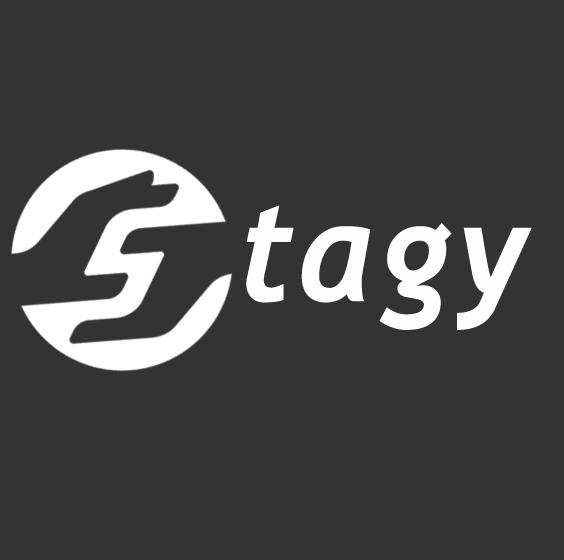
<style>
.page{position:relative;width:564px;height:560px;background:#333333}
.page>*{position:absolute;margin:0}
.t1{font:139.7px "Trebuchet-BoldItalic";color:#fefefe;font-weight:bold;scale:0.95 1}
</style>
<div class="page">
<p class="t1" style="left:246px;top:205px;width:286px;height:125px">tagy</p>
</div>
